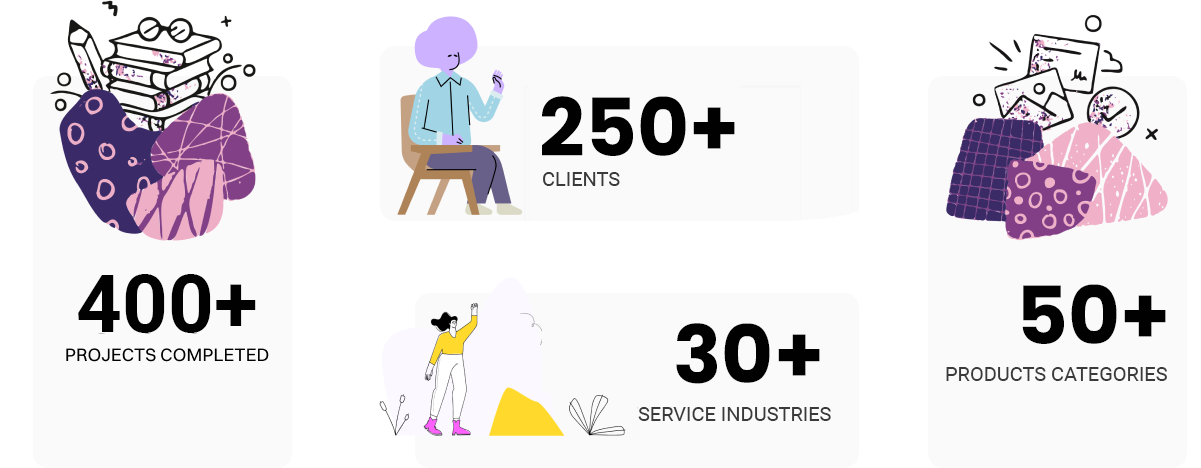
<style>
.page{position:relative;width:1201px;height:468px;background:#fafafa}
.page>*{position:absolute;margin:0}
.t1{font:80px "Poppins-Bold";color:#010101}
.t2{font:20px "Roboto-Regular";color:#3a3a3a;text-transform:uppercase}
.t3{font:80px "Roboto-Bold";color:#010101}
</style>
<div class="page">
<p class="t1" style="left:542px;top:96px;width:193px;height:60px">250+</p>
<p class="t2" style="left:543px;top:172px;width:77px;height:14px">Clients</p>
<p class="t3" style="left:78px;top:274px;width:178px;height:59px">400+</p>
<p class="t1" style="left:1022px;top:284px;width:144px;height:60px">50+</p>
<p class="t1" style="left:676px;top:323px;width:144px;height:61px">30+</p>
<p class="t2" style="left:946px;top:367px;width:221px;height:14px">Products Categories</p>
<p class="t2" style="left:638px;top:407px;width:193px;height:14px">Service Industries</p>
</div>
